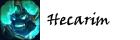
<style>
.page{position:relative;width:140px;height:40px;background:#ffffff}
.page>*{position:absolute;margin:0}
.t1{font:12px "VinerHandITC";color:#000000}
</style>
<div class="page">
<p class="t1" style="left:47px;top:12px;width:63px;height:14px">Hecarim</p>
</div>
